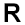
<style>
.page{position:relative;width:25px;height:25px;background:#ffffff}
.page>*{position:absolute;margin:0}
.t1{font:26px "Arial-BoldMT";color:#000000}
</style>
<div class="page">
<p class="t1" style="left:4px;top:3px;width:17px;height:19px">R</p>
</div>
